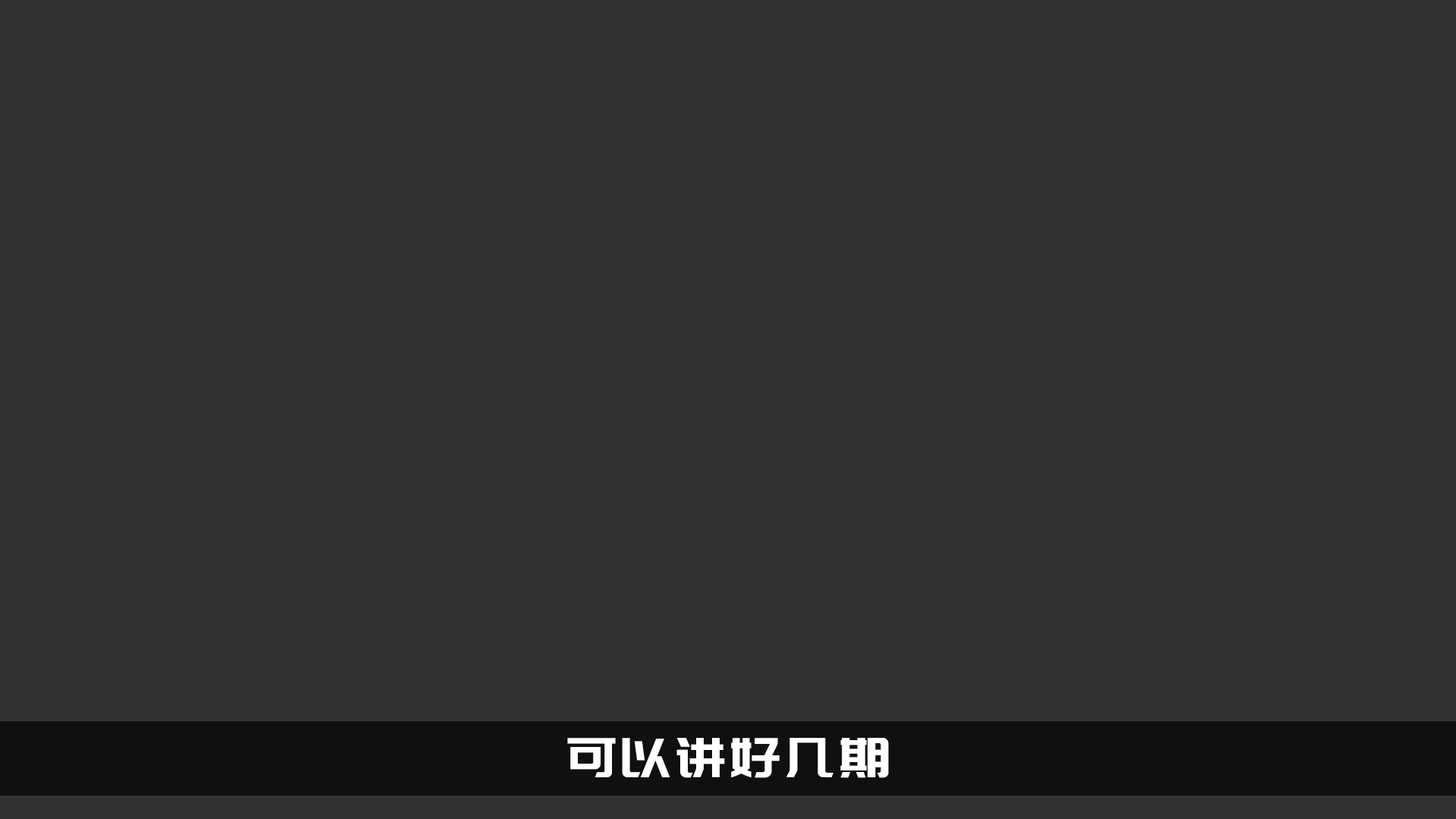
<style>
.page{position:relative;width:1456px;height:819px;background:#333333}
.page>*{position:absolute;margin:0}
.t1{font:54.6px "PangMenZhengDao-3";color:#ffffff}
</style>
<div class="page">
<p class="t1" style="left:567px;top:738px;width:322px;height:40px">可以讲好几期</p>
</div>
